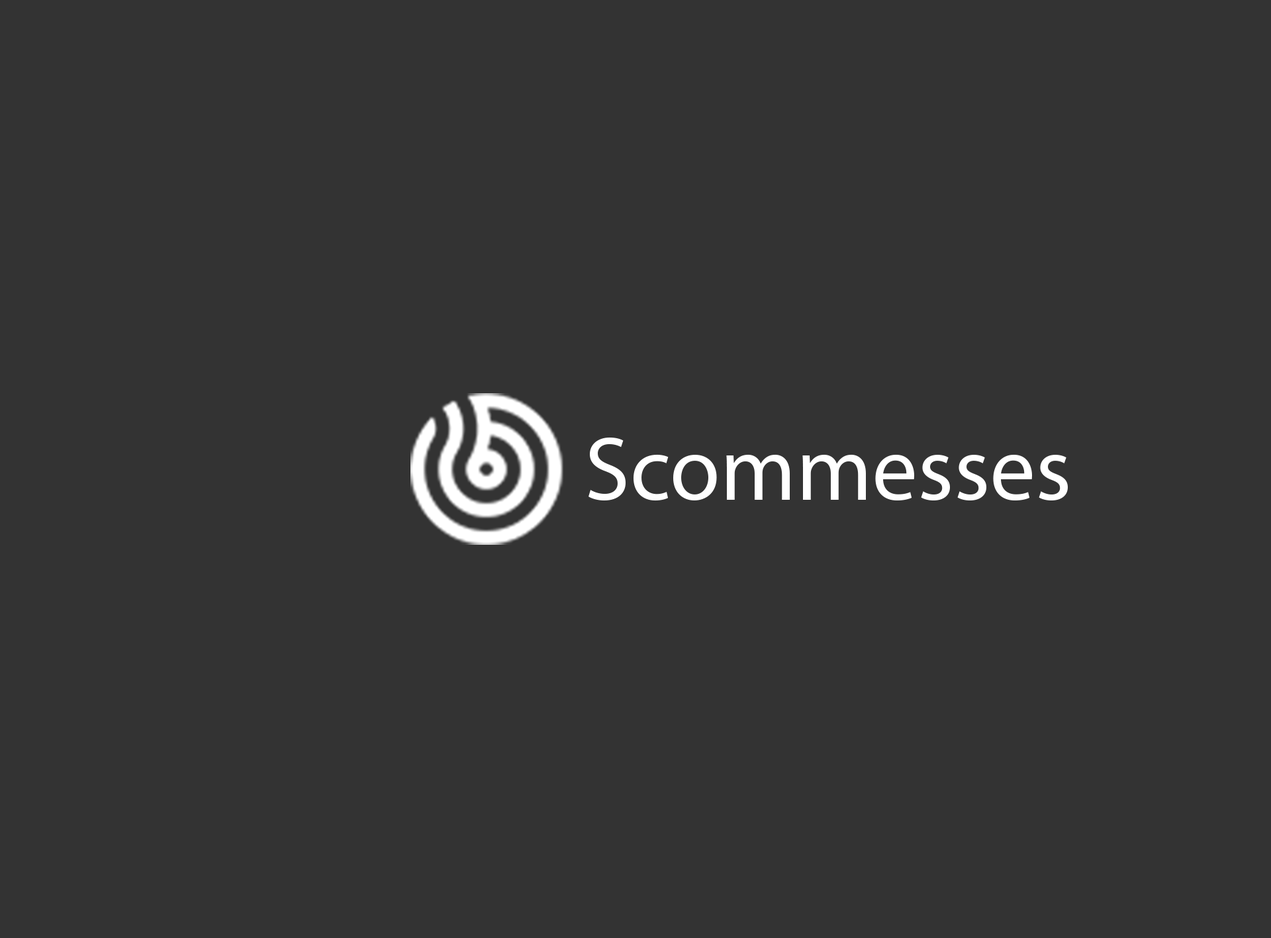
<style>
.page{position:relative;width:1271px;height:938px;background:#333333}
.page>*{position:absolute;margin:0}
.t1{font:91px "MyriadPro-Regular";color:#ffffff}
</style>
<div class="page">
<p class="t1" style="left:589px;top:437px;width:479px;height:64px">Scommesses</p>
</div>
